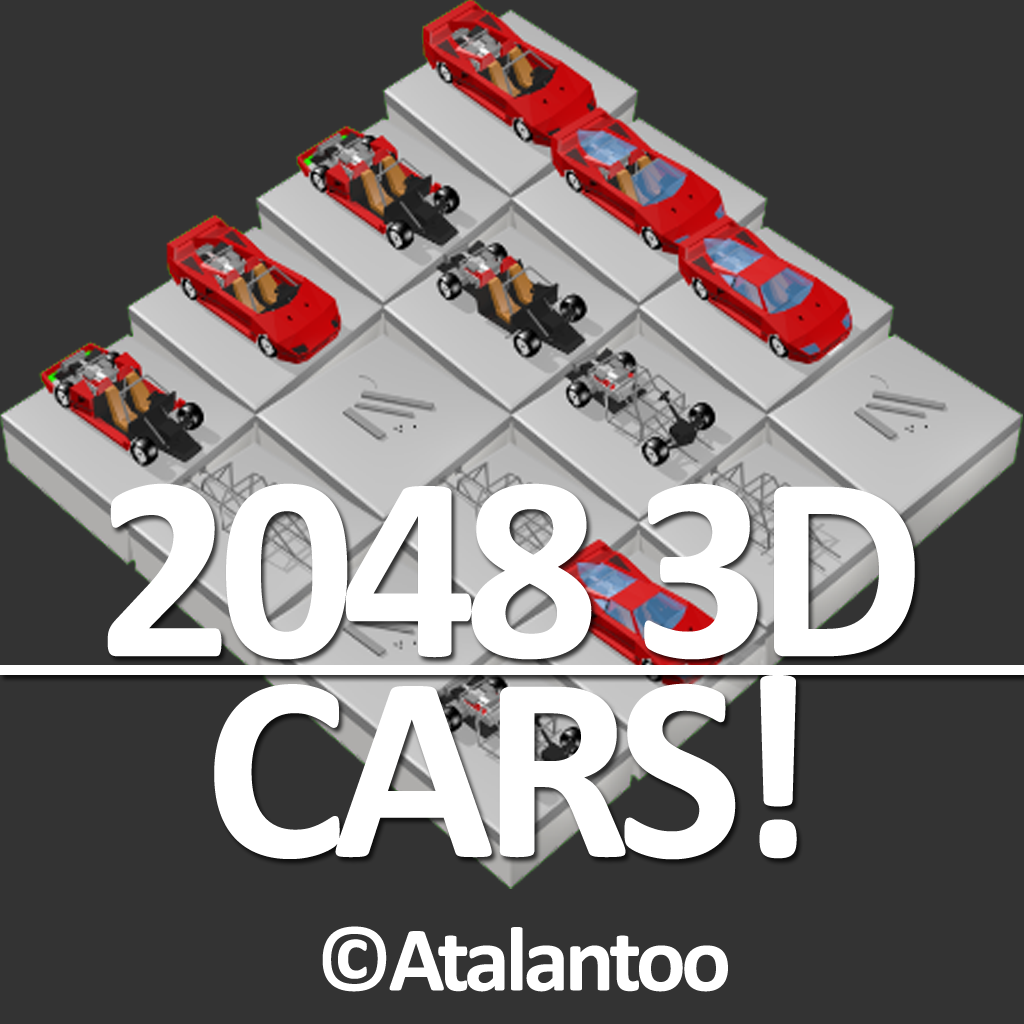
<style>
.page{position:relative;width:1024px;height:1024px;background:#333333}
.page>*{position:absolute;margin:0}
.t1{font:268px/200px "Calibri-Bold";letter-spacing:-0.05em;color:#ffffff}
.t2{font:93px "Calibri-Bold";letter-spacing:-0.05em;color:#ffffff}
</style>
<div class="page">
<p class="t1" style="left:107px;top:483px;width:808px;height:377px;text-align:center">2048 3D<br>CARS!</p>
<p class="t2" style="left:322px;top:926px;width:406px;height:66px">©Atalantoo</p>
</div>
